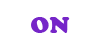
<style>
.page{position:relative;width:100px;height:50px;background:#ffffff}
.page>*{position:absolute;margin:0}
.t1{font:24px "CooperBlack";color:#7626c8}
</style>
<div class="page">
<p class="t1" style="left:31px;top:17px;width:39px;height:16px">ON</p>
</div>
